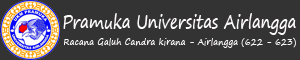
<style>
.page{position:relative;width:300px;height:60px;background:#333333}
.page>*{position:absolute;margin:0}
.t1{font:18px "SegoePrint";color:#fcf9f9;scale:0.82 1}
.t2{font:9.2px "SegoePrint";color:#fcf9f9;scale:0.91 1}
</style>
<div class="page">
<p class="t1" style="left:63px;top:13px;width:233px;height:22px">Pramuka Universitas Airlangga</p>
<p class="t2" style="left:64px;top:37px;width:232px;height:11px">Racana Galuh Candra kirana - Airlangga (622 - 623)</p>
</div>
